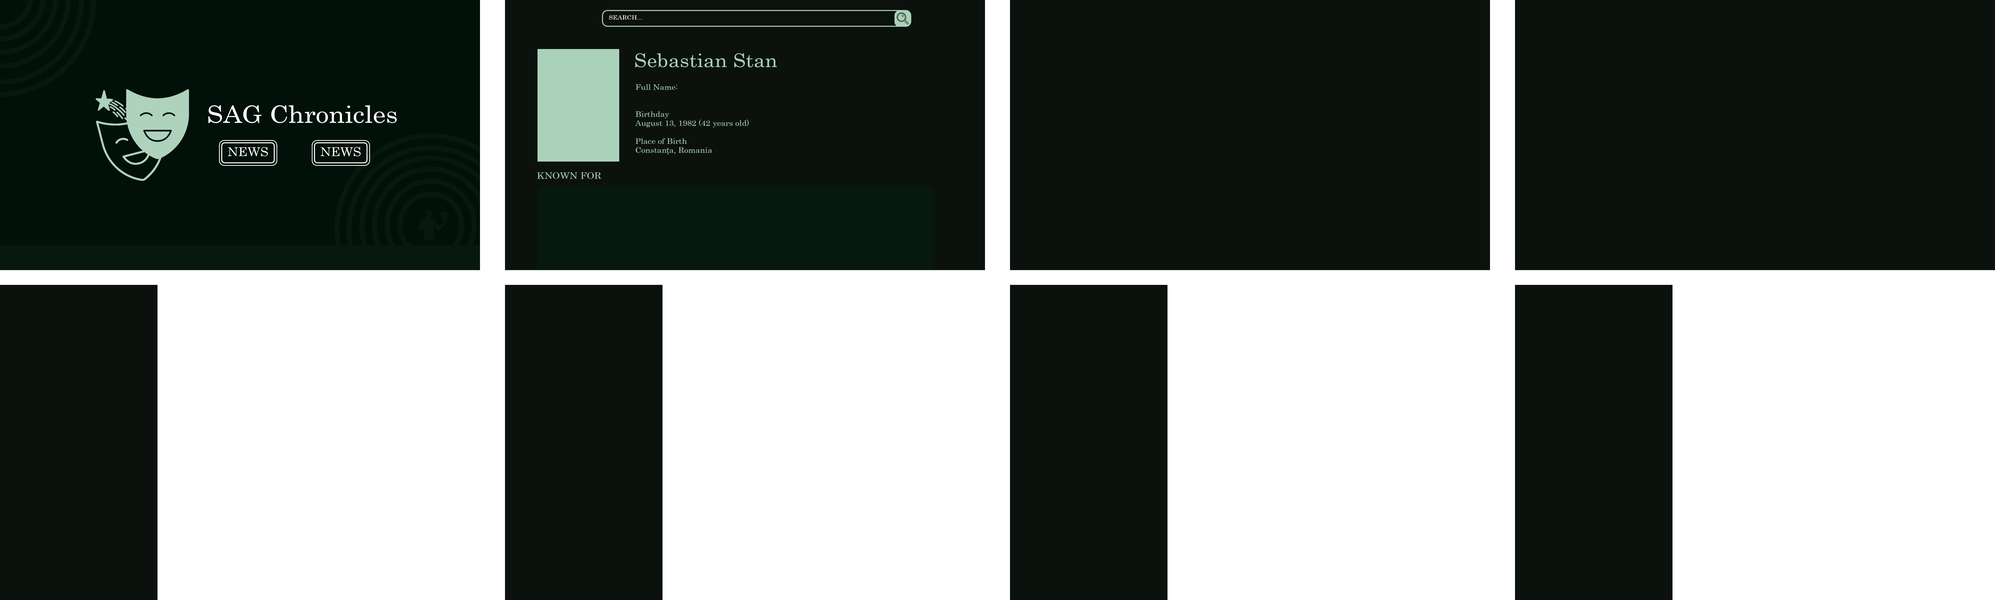
<style>
.page{position:relative;width:1995px;height:600px;background:#0b120e}
.page>*{position:absolute;margin:0}
.t1{font:6px "Century";color:#ffffff;scale:1.09 1}
.t2{font:18.8px "Century";color:#aad2ba;scale:1.09 1}
.t3{font:7.5px "Century";color:#aad2ba;scale:1.09 1}
.t4{font:7.5px "MyriadPro-Regular";color:#aad2ba;scale:1.09 1}
.t5{font:24px "Century";color:#ffffff;scale:1.09 1}
.t6{font:9px "Century";color:#aad2ba;scale:1.09 1}
</style>
<div class="page">
<p class="t1" style="left:609px;top:15px;width:33px;height:5px">SEARCH...</p>
<p class="t2" style="left:635px;top:53px;width:142px;height:14px">Sebastian Stan</p>
<p class="t3" style="left:635px;top:84px;width:114px;height:70px">Full Name:<br><br><br>Birthday<br>August 13, 1982 (42 years old) <br><br>Place of Birth<br>Constan<span class="t4">ț</span>a, Romania</p>
<p class="t5" style="left:208px;top:105px;width:189px;height:18px">SAG Chronicles</p>
<p class="t6" style="left:537px;top:172px;width:64px;height:7px">KNOWN FOR</p>
</div>
